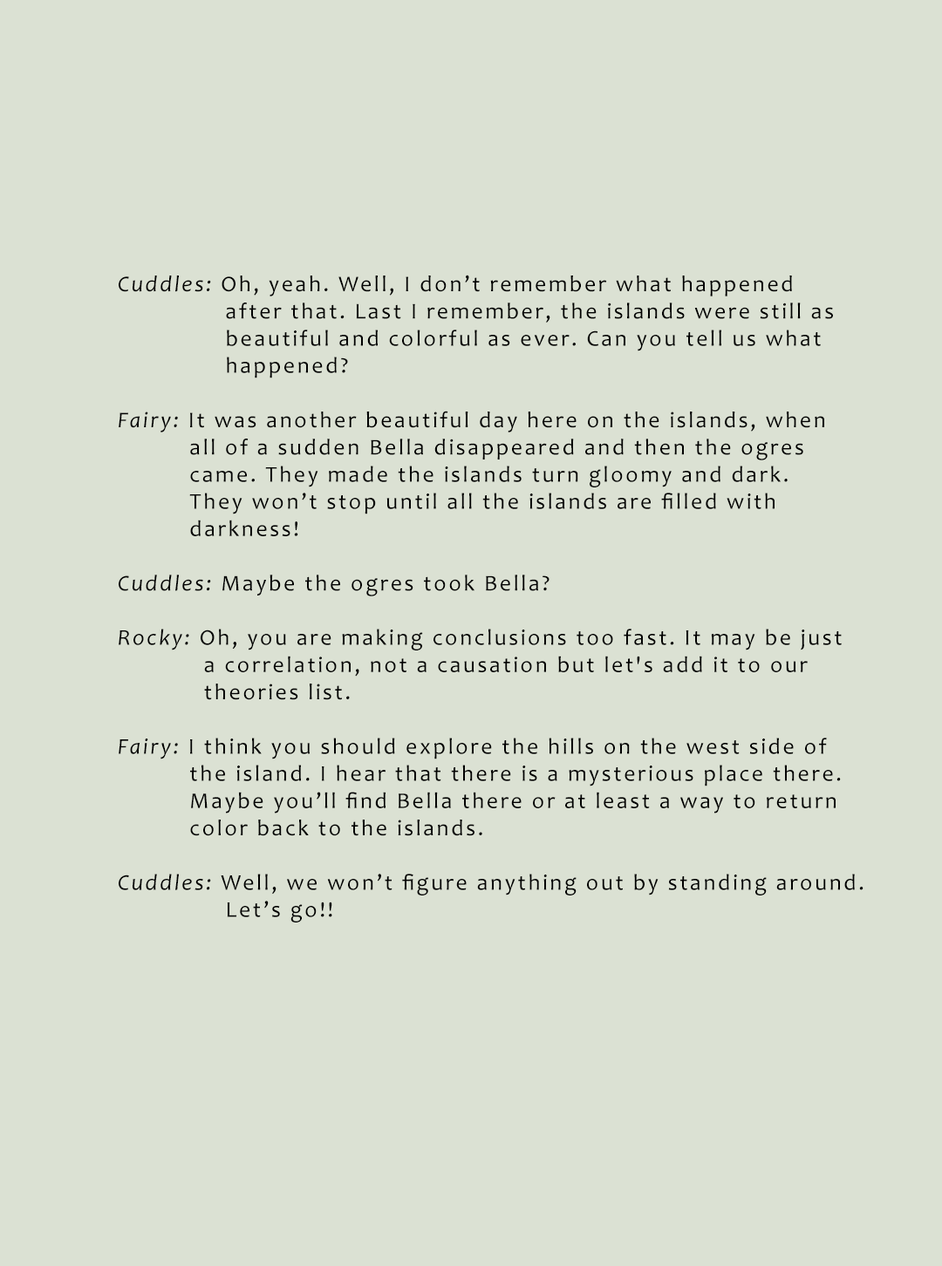
<style>
.page{position:relative;width:942px;height:1266px;background:#dbe1d3}
.page>*{position:absolute;margin:0}
.t1{font:22.7px "Candara";letter-spacing:0.1em;color:#000000}
.t2{font:22.7px "Candara-Italic";letter-spacing:0.1em;color:#000000}
</style>
<div class="page">
<p class="t1" style="left:119px;top:275px;width:744px;height:648px"><span class="t2">Cuddles: </span>Oh, yeah. Well, I don’t remember what happened<br>               after that. Last I remember, the islands were still as <br>               beautiful and colorful as ever. Can you tell us what <br>               happened?<br><span class="t2"><br>Fairy: </span>It was another beautiful day here on the islands, when <br>          all of a sudden Bella disappeared and then the ogres <br>          came. They made the islands turn gloomy and dark. <br>          They won’t stop until all the islands are filled with <br>          darkness! <br><span class="t2"><br>Cuddles: </span>Maybe the ogres took Bella?<br><span class="t2"><br>Rocky: </span>Oh, you are making conclusions too fast. It may be just <br>            a correlation, not a causation but let's add it to our <br>            theories list.<br><span class="t2"><br>Fairy: </span>I think you should explore the hills on the west side of <br>          the island. I hear that there is a mysterious place there. <br>          Maybe you’ll find Bella there or at least a way to return <br>          color back to the islands.<br><span class="t2"><br>Cuddles: </span>Well, we won’t figure anything out by standing around. <br>               Let’s go!!</p>
</div>
